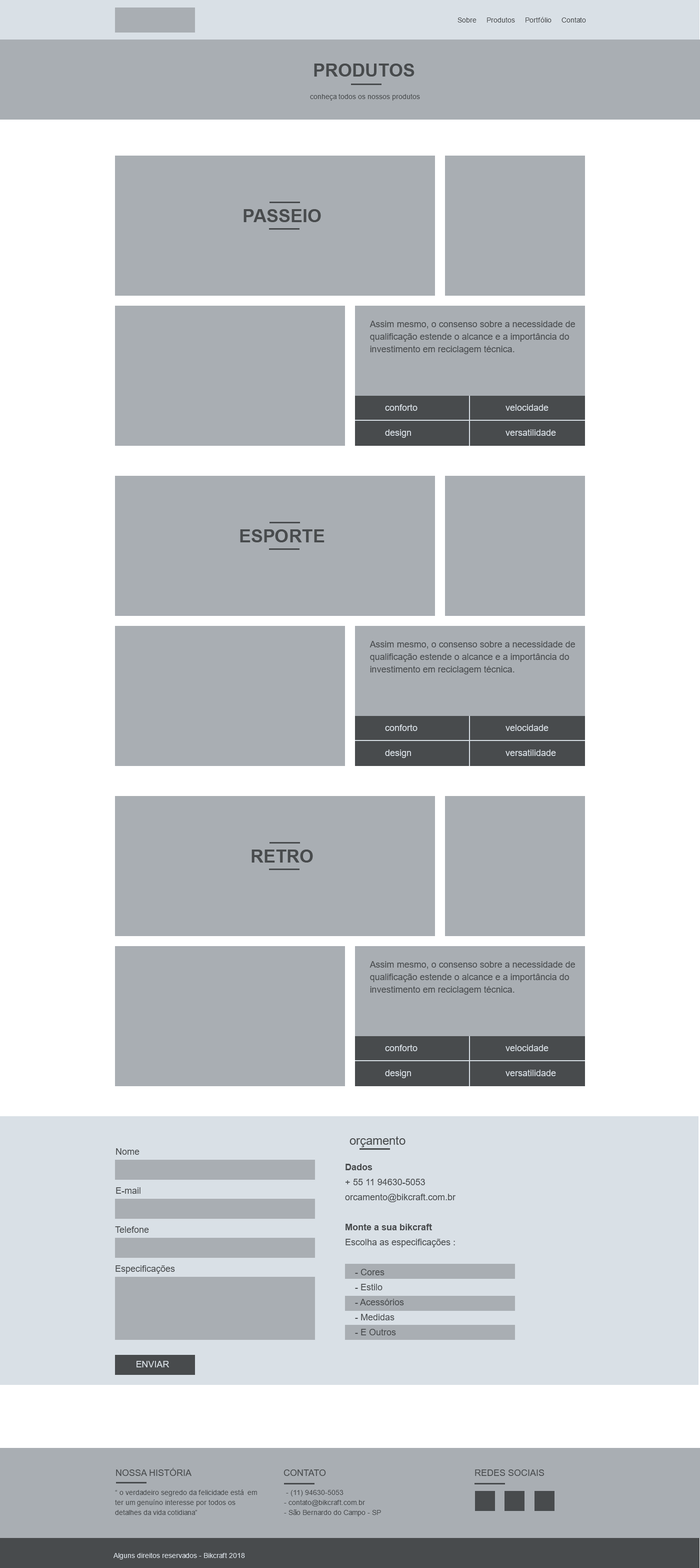
<style>
.page{position:relative;width:700px;height:1568px;background:#a9aeb3}
.page>*{position:absolute;margin:0}
.t1{font:7px "ArialMT";color:#484b4d}
.t2{font:18px "Arial-BoldMT";color:#484b4d;text-transform:uppercase}
.t3{font:9px/12.5px "ArialMT";color:#484b4d}
.t4{font:9px "ArialMT";color:#d9e0e6}
.t5{font:12px "ArialMT";color:#484b4d}
.t6{font:9px "ArialMT";color:#484b4d}
.t7{font:9px/15px "ArialMT";color:#484b4d}
.t8{font:9px/15px "Arial-BoldMT";color:#484b4d}
.t9{font:9px "ArialMT";color:#484b4d;text-transform:uppercase}
.t10{font:7px/10px "ArialMT";color:#484b4d}
.t11{font:7px "ArialMT";color:#d9e0e6}
.t12{font:7px "ArialMT";color:#d9e0e6;text-transform:uppercase}
</style>
<div class="page">
<p class="t1" style="left:458px;top:17px;width:128px;height:6px">Sobre     Produtos     Portfólio     Contato</p>
<p class="t2" style="left:314px;top:64px;width:101px;height:13px">produtos</p>
<p class="t1" style="left:310px;top:94px;width:110px;height:7px">conheça todos os nossos produtos</p>
<p class="t2" style="left:244px;top:209px;width:77px;height:13px">passeio</p>
<p class="t3" style="left:370px;top:321px;width:205px;height:33px">Assim mesmo, o consenso sobre a necessidade de qualificação estende o alcance e a importância do investimento em reciclagem técnica.</p>
<p class="t4" style="left:385px;top:404px;width:33px;height:7px">conforto</p>
<p class="t4" style="left:506px;top:404px;width:43px;height:7px">velocidade</p>
<p class="t4" style="left:385px;top:429px;width:26px;height:9px">design</p>
<p class="t4" style="left:506px;top:429px;width:50px;height:7px">versatilidade</p>
<p class="t2" style="left:240px;top:529px;width:85px;height:13px">esporte</p>
<p class="t3" style="left:370px;top:641px;width:205px;height:33px">Assim mesmo, o consenso sobre a necessidade de qualificação estende o alcance e a importância do investimento em reciclagem técnica.</p>
<p class="t4" style="left:385px;top:724px;width:33px;height:7px">conforto</p>
<p class="t4" style="left:506px;top:724px;width:43px;height:7px">velocidade</p>
<p class="t4" style="left:385px;top:749px;width:26px;height:9px">design</p>
<p class="t4" style="left:506px;top:749px;width:50px;height:7px">versatilidade</p>
<p class="t2" style="left:252px;top:850px;width:61px;height:13px">retro</p>
<p class="t3" style="left:370px;top:961px;width:205px;height:34px">Assim mesmo, o consenso sobre a necessidade de qualificação estende o alcance e a importância do investimento em reciclagem técnica.</p>
<p class="t4" style="left:385px;top:1045px;width:33px;height:6px">conforto</p>
<p class="t4" style="left:506px;top:1045px;width:43px;height:6px">velocidade</p>
<p class="t4" style="left:385px;top:1070px;width:26px;height:8px">design</p>
<p class="t4" style="left:506px;top:1070px;width:50px;height:6px">versatilidade</p>
<p class="t5" style="left:350px;top:1136px;width:56px;height:11px">orçamento</p>
<p class="t6" style="left:116px;top:1148px;width:24px;height:7px">Nome</p>
<p class="t7" style="left:345px;top:1164px;width:111px;height:171px"><span class="t8">Dados<br></span>+ 55 11 94630-5053<br>orcamento@bikcraft.com.br<br><br><span class="t8">Monte a sua bikcraft<br></span>Escolha as especificações :<br><br>    - Cores<br>    - Estilo<br>    - Acessórios<br>    - Medidas<br>    - E Outros</p>
<p class="t6" style="left:116px;top:1187px;width:25px;height:7px">E-mail</p>
<p class="t6" style="left:115px;top:1226px;width:34px;height:7px">Telefone</p>
<p class="t6" style="left:116px;top:1265px;width:59px;height:9px">Especificações</p>
<p class="t4" style="left:137px;top:1361px;width:32px;height:6px">ENVIAR</p>
<p class="t9" style="left:116px;top:1468px;width:76px;height:8px">Nossa história</p>
<p class="t9" style="left:284px;top:1469px;width:42px;height:7px">Contato</p>
<p class="t9" style="left:475px;top:1469px;width:69px;height:7px">redes sociais</p>
<p class="t10" style="left:115px;top:1489px;width:142px;height:26px">“ o verdadeiro segredo da felicidade está  em <br>ter um genuíno interesse por todos os <br>detalhes da vida cotidiana”</p>
<p class="t10" style="left:284px;top:1490px;width:97px;height:26px">- (11) 94630-5053<br>- contato@bikcraft.com.br<br>- São Bernardo do Campo - SP</p>
<p class="t11" style="left:114px;top:1553px;width:131px;height:6px"><span class="t12">A</span>lguns direitos reservados - Bikcraft 2018</p>
</div>
